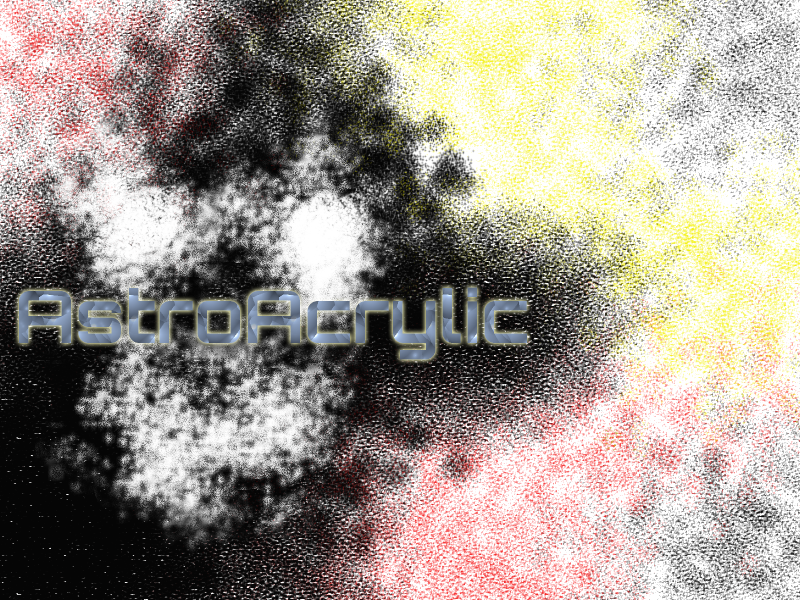
<style>
.page{position:relative;width:800px;height:600px}
.page>*{position:absolute;margin:0}
.t1{font:72px "Orbitron-Bold"}
</style>
<div class="page">
<p class="t1" style="left:19px;top:287px;width:508px;height:73px">AstroAcrylic</p>
</div>
